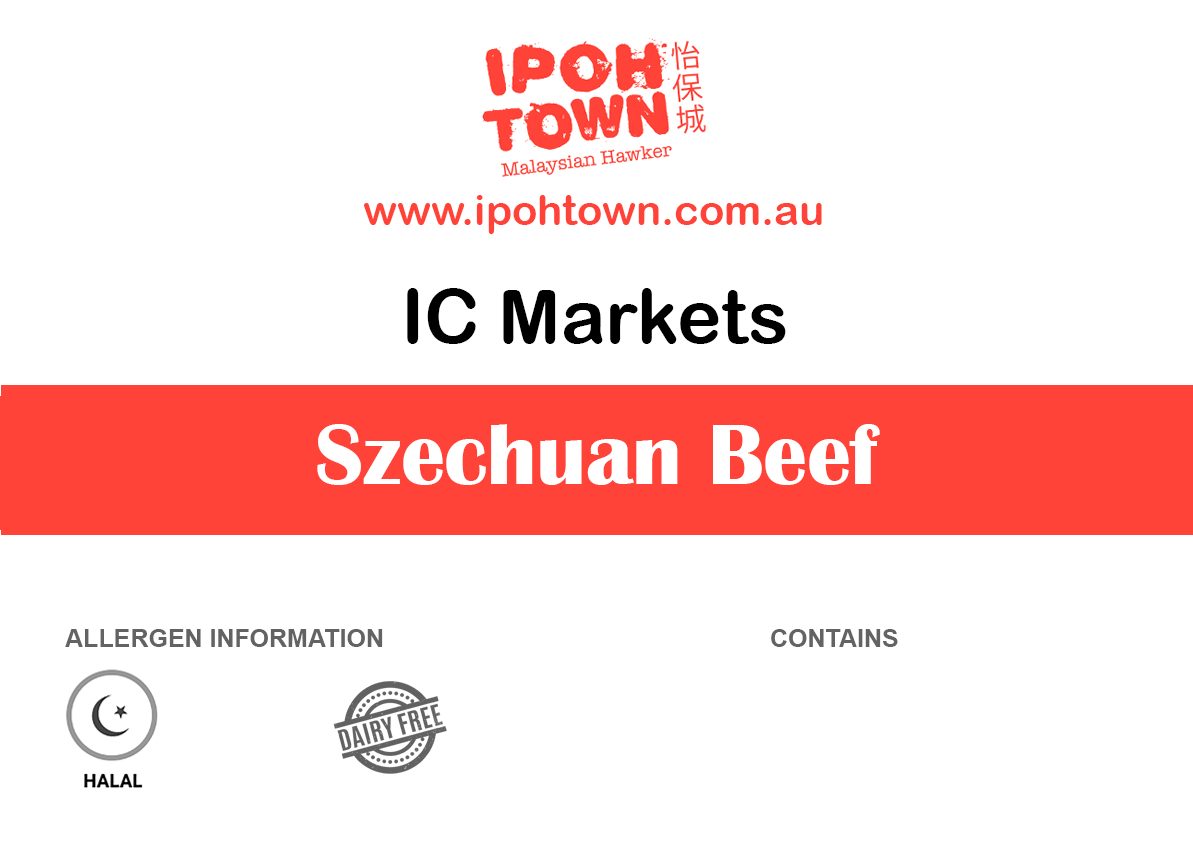
<style>
.page{position:relative;width:1193px;height:850px;background:#ffffff}
.page>*{position:absolute;margin:0}
.t1{font:41.7px "ArialRoundedMTBold";color:#ff4338}
.t2{font:75px "ArialRoundedMTBold";color:#000000}
.t3{font:87.5px "BritannicBold";color:#ffffff}
.t4{font:25px "Arial-BoldMT";color:#636363}
</style>
<div class="page">
<p class="t1" style="left:364px;top:195px;width:458px;height:39px">www.ipohtown.com.au</p>
<p class="t2" style="left:407px;top:288px;width:379px;height:56px">IC Markets</p>
<p class="t3" style="left:317px;top:424px;width:563px;height:61px">Szechuan Beef</p>
<p class="t4" style="left:65px;top:629px;width:318px;height:18px">ALLERGEN INFORMATION</p>
<p class="t4" style="left:771px;top:629px;width:127px;height:18px">CONTAINS</p>
</div>
